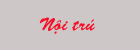
<style>
.page{position:relative;width:140px;height:50px;background:#cdc8c7}
.page>*{position:absolute;margin:0}
.t1{font:18px "VNI-Brush-Italic";color:#f60f25}
</style>
<div class="page">
<p class="t1" style="left:39px;top:17px;width:56px;height:17px">Noäi truù</p>
</div>
